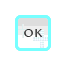
<style>
.page{position:relative;width:64px;height:64px;background:#ffffff}
.page>*{position:absolute;margin:0}
.t1{font:12px "AmiraParadiso";letter-spacing:0.1em;color:#333333}
</style>
<div class="page">
<p class="t1" style="left:24px;top:29px;width:19px;height:8px">OK</p>
</div>
